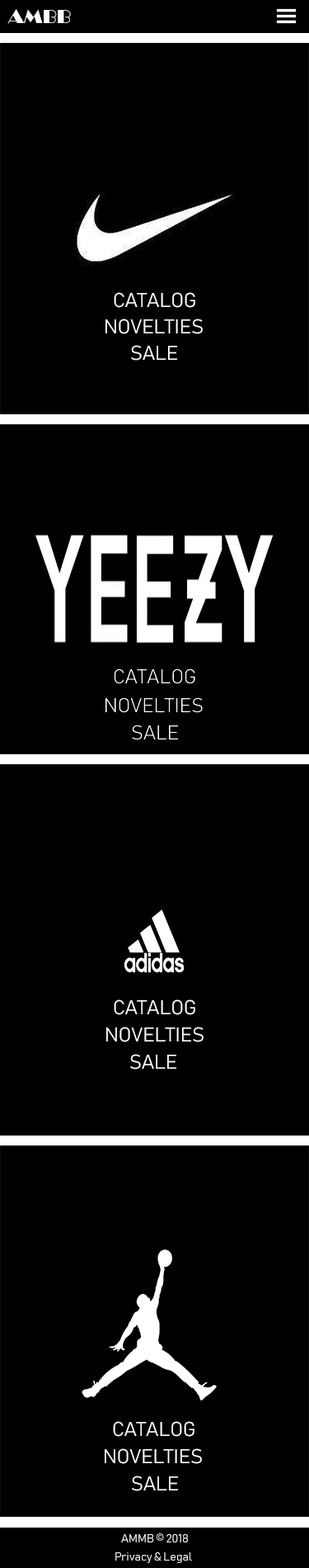
<style>
.page{position:relative;width:309px;height:1568px;background:#000000}
.page>*{position:absolute;margin:0}
.t1{font:19.8px "Broadway";color:#ffffff}
.t2{font:19.8px "Bahnschrift";color:#ffffff}
.t3{font:11.6px "Bahnschrift";color:#ffffff}
</style>
<div class="page">
<p class="t1" style="left:7px;top:9px;width:64px;height:15px">AMBB</p>
<p class="t2" style="left:114px;top:292px;width:82px;height:16px">CATALOG</p>
<p class="t2" style="left:106px;top:319px;width:97px;height:15px">NOVELTIES</p>
<p class="t2" style="left:131px;top:345px;width:46px;height:16px">SALE</p>
<p class="t2" style="left:114px;top:999px;width:82px;height:16px">CATALOG</p>
<p class="t2" style="left:106px;top:1027px;width:98px;height:15px">NOVELTIES</p>
<p class="t2" style="left:130px;top:1054px;width:47px;height:16px">SALE</p>
<p class="t2" style="left:113px;top:1421px;width:82px;height:16px">CATALOG</p>
<p class="t2" style="left:105px;top:1448px;width:97px;height:16px">NOVELTIES</p>
<p class="t2" style="left:132px;top:1476px;width:46px;height:15px">SALE</p>
<p class="t3" style="left:121px;top:1533px;width:67px;height:9px">AMMB © 2018</p>
<p class="t3" style="left:116px;top:1552px;width:76px;height:11px">Privacy &amp; Legal</p>
</div>
